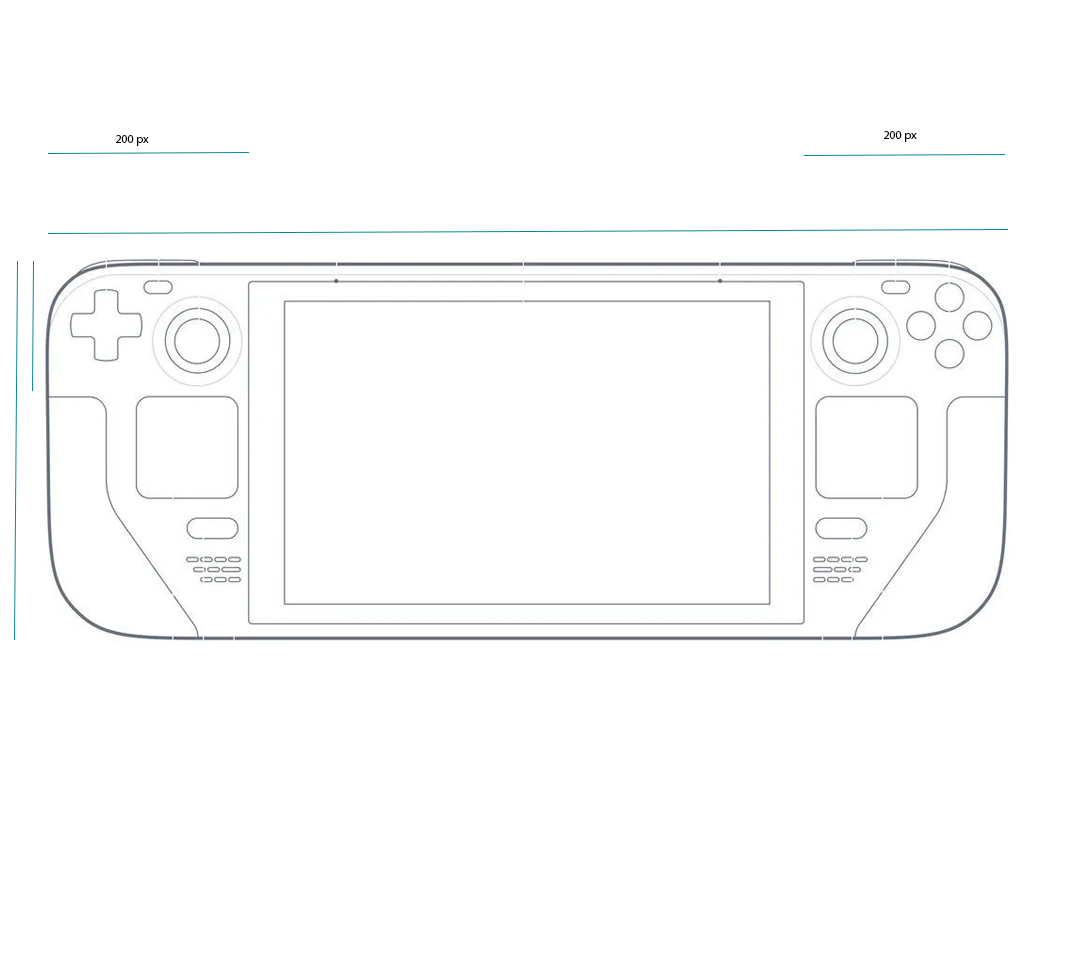
<style>
.page{position:relative;width:1080px;height:980px;background:#ffffff}
.page>*{position:absolute;margin:0}
.t1{font:12px "MyriadPro-Regular";color:#000000}
</style>
<div class="page">
<p class="t1" style="left:116px;top:135px;width:33px;height:11px">200 px</p>
<p class="t1" style="left:884px;top:131px;width:33px;height:11px">200 px</p>
</div>
